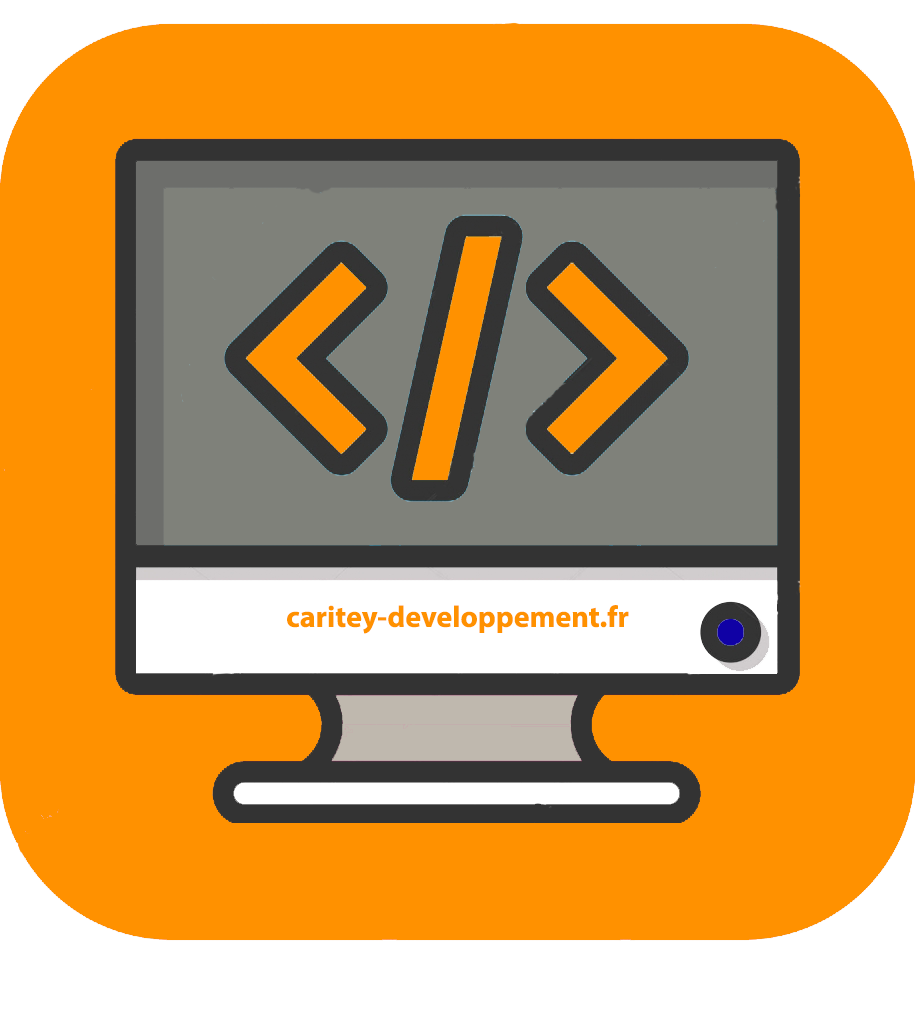
<style>
.page{position:relative;width:915px;height:1024px;background:#ff9100}
.page>*{position:absolute;margin:0}
.t1{font:30px "MyriadPro-Bold";color:#ff9100}
</style>
<div class="page">
<p class="t1" style="left:287px;top:605px;width:342px;height:29px">caritey-developpement.fr</p>
</div>
